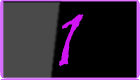
<style>
.page{position:relative;width:140px;height:80px;background:#000000}
.page>*{position:absolute;margin:0}
.t1{font:74.2px "VinerHandITC";color:#d015f2}
</style>
<div class="page">
<p class="t1" style="left:58px;top:14px;width:26px;height:53px">1</p>
</div>
